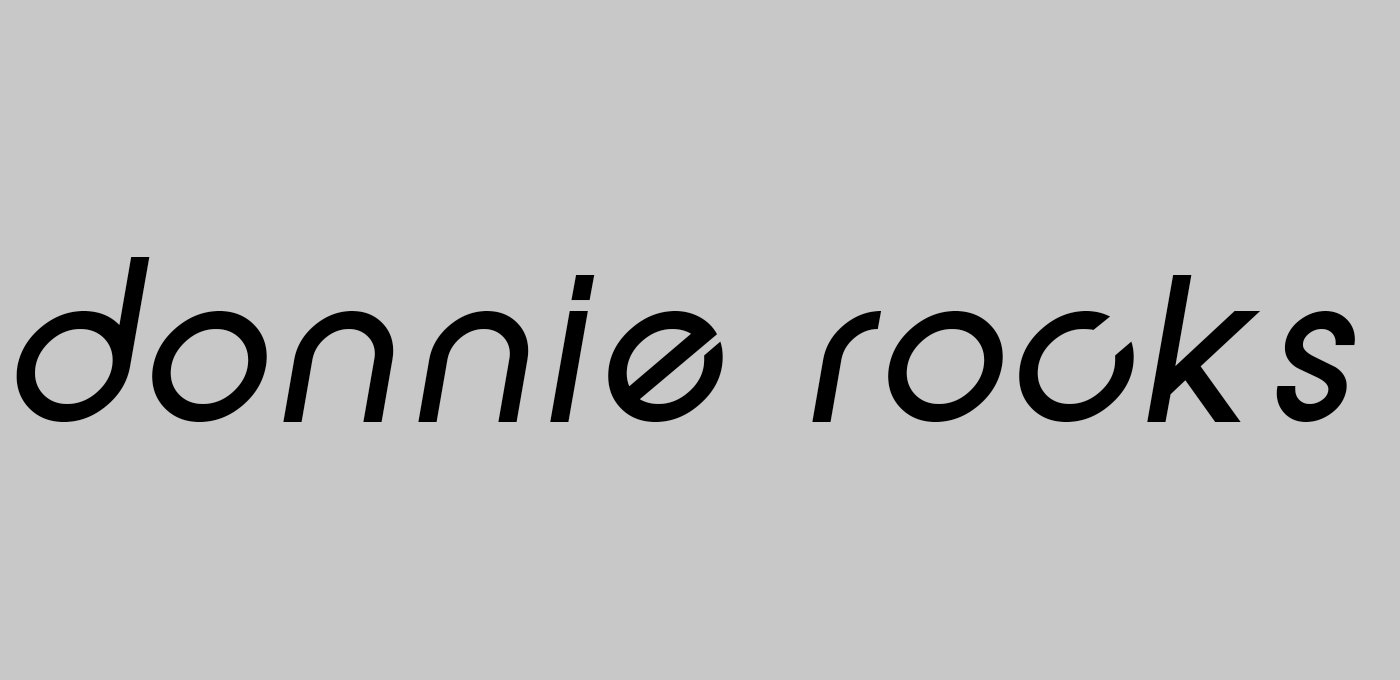
<style>
.page{position:relative;width:1400px;height:680px;background:#c9c8c8}
.page>*{position:absolute;margin:0}
.t1{font:200px "SFNewRepublicItalic";color:#000000}
</style>
<div class="page">
<p class="t1" style="left:16px;top:257px;width:1339px;height:165px">donnie rocks</p>
</div>
